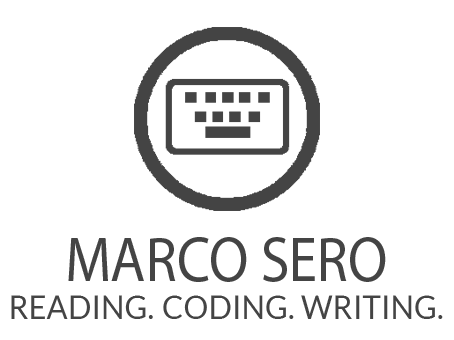
<style>
.page{position:relative;width:454px;height:340px;background:#ffffff}
.page>*{position:absolute;margin:0}
.t1{font:64px "MyriadPro-Regular";color:#444444;scale:0.9 1}
.t2{font:33px "Lato-Regular";color:#444444;scale:0.95 1}
</style>
<div class="page">
<p class="t1" style="left:68px;top:237px;width:318px;height:45px">MARCO SERO</p>
<p class="t2" style="left:11px;top:295px;width:432px;height:24px">READING. CODING. WRITING.</p>
</div>
